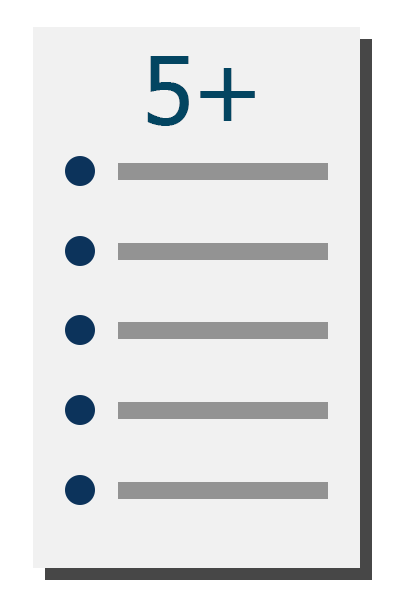
<style>
.page{position:relative;width:400px;height:600px;background:#f1f1f1}
.page>*{position:absolute;margin:0}
.t1{font:95px "Tahoma";color:#034561}
</style>
<div class="page">
<p class="t1" style="left:147px;top:56px;width:108px;height:70px">5+</p>
</div>
